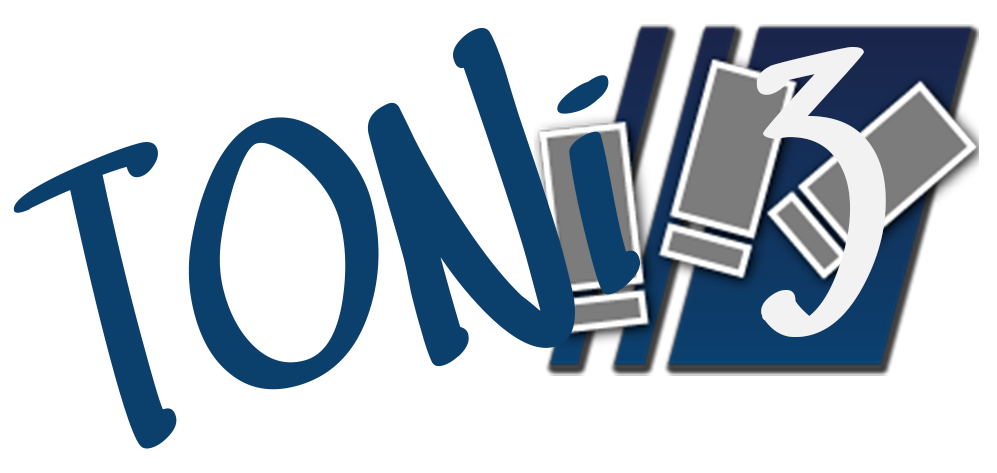
<style>
.page{position:relative;width:997px;height:473px;background:#ffffff}
.page>*{position:absolute;margin:0}
.t1{font:500px "SwingSetBB";color:#0b3f6c}
.t2{font:500px "SwingSetBB";color:#f2f2f2}
</style>
<div class="page">
<p class="t1" style="left:13px;top:27px;width:628px;height:422px;rotate:-15deg">TONi</p>
<p class="t2" style="left:756px;top:47px;width:130px;height:290px">3</p>
</div>
